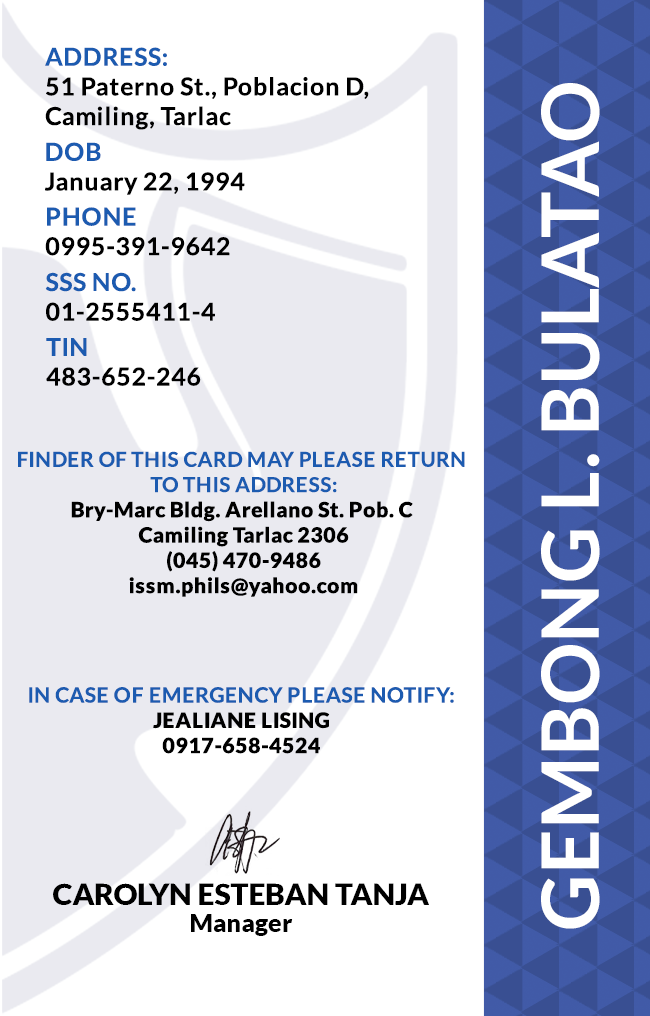
<style>
.page{position:relative;width:650px;height:1016px;background:#ffffff}
.page>*{position:absolute;margin:0}
.t1{font:24.7px/29.6px "Lato-Bold";letter-spacing:0.025em;color:#000000}
.t2{font:24.7px/29.6px "Lato-Bold";letter-spacing:0.025em;color:#1c5bb0}
.t3{font:79.2px "Lato-Bold";color:#ffffff}
.t4{font:21.1px "Lato-Black";letter-spacing:0.025em}
.t5{font:20.5px/25.3px "Lato-Bold";letter-spacing:0.025em;text-transform:uppercase}
.t6{font:21.1px/25.3px "Lato-Bold";letter-spacing:0.025em;color:#1c5bb0}
.t7{font:21.1px "Lato-Black";letter-spacing:0.025em;color:#000000}
.t8{font:29.5px "Lato-Black";color:#000000}
.t9{font:25px "Lato-Black";color:#000000}
</style>
<div class="page">
<p class="t1" style="left:45px;top:47px;width:324px;height:83px"><span class="t2">ADDRESS:<br></span>51 Paterno St., Poblacion D,<br>Camiling, Tarlac</p>
<p class="t3" style="left:541px;top:83px;width:59px;height:846px;rotate:-90deg">GEMBONG L. BULATAO</p>
<p class="t1" style="left:45px;top:142px;width:200px;height:53px"><span class="t2">DOB<br></span>January 22, 1994</p>
<p class="t1" style="left:45px;top:207px;width:185px;height:49px"><span class="t2">PHONE <br></span>0995-391-9642</p>
<p class="t1" style="left:45px;top:272px;width:170px;height:49px"><span class="t2">SSS NO.<br></span>01-2555411-4</p>
<p class="t1" style="left:46px;top:338px;width:155px;height:48px"><span class="t2">TIN<br></span>483-652-246</p>
<p class="t4" style="left:18px;top:451px;width:447px;height:146px;text-align:center"><span class="t5">Finder of this card may please return <br>to this address:<br></span>Bry-Marc Bldg. Arellano St. Pob. C <br>Camiling Tarlac 2306<br>(045) 470-9486<br>issm.phils@yahoo.com</p>
<p class="t6" style="left:29px;top:687px;width:425px;height:67px;text-align:center">IN CASE OF EMERGENCY PLEASE NOTIFY:<br><span class="t7">JEALIANE LISING<br>0917-658-4524</span></p>
<p class="t8" style="left:53px;top:883px;width:376px;height:22px">CAROLYN ESTEBAN TANJA</p>
<p class="t9" style="left:191px;top:914px;width:102px;height:22px">Manager</p>
</div>
